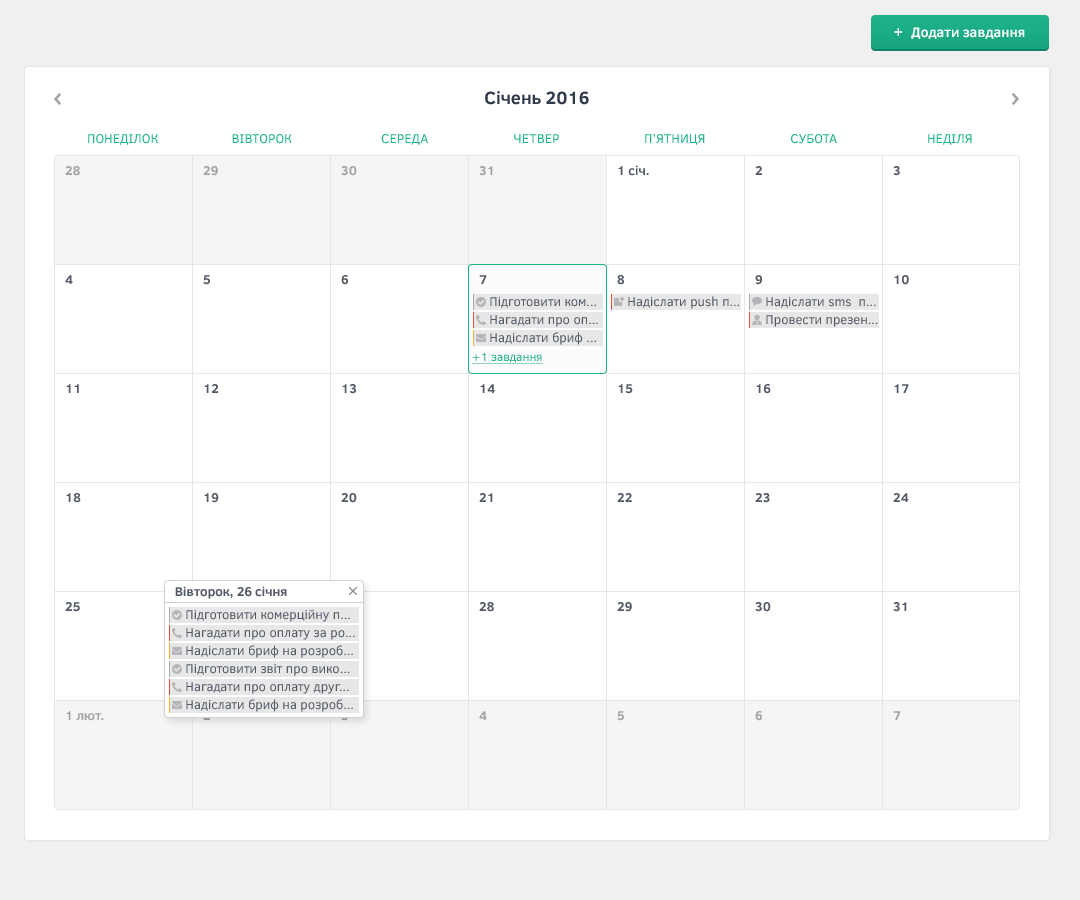
<style>
.page{position:relative;width:1080px;height:900px;background:#ffffff}
.page>*{position:absolute;margin:0}
.t1{font:14px "ClearSans-Bold";color:#ffffff}
.t2{font:18px "ClearSans-Bold";color:#303a4b}
.t3{font:13px "ClearSans";color:#1fb38a;text-transform:uppercase}
.t4{font:13px "ClearSans-Bold";color:#a2a2a2}
.t5{font:13px "ClearSans-Bold";color:#535a65}
.t6{font:13px "ClearSans";color:#535a65}
.t7{font:12px "ClearSans";color:#1dab87;text-decoration:underline}
.t8{font:13px "ClearSans-Bold"}
</style>
<div class="page">
<p class="t1" style="left:894px;top:28px;width:9px;height:8px">+</p>
<p class="t1" style="left:911px;top:27px;width:114px;height:12px">Додати завдання</p>
<p class="t2" style="left:485px;top:91px;width:104px;height:14px">Січень 2016</p>
<p class="t3" style="left:88px;top:134px;width:70px;height:11px">Понеділок</p>
<p class="t3" style="left:232px;top:134px;width:60px;height:10px">Вівторок</p>
<p class="t3" style="left:381px;top:134px;width:47px;height:11px">Середа</p>
<p class="t3" style="left:514px;top:134px;width:45px;height:9px">Четвер</p>
<p class="t3" style="left:645px;top:134px;width:60px;height:11px">П’ятниця</p>
<p class="t3" style="left:791px;top:134px;width:46px;height:10px">Субота</p>
<p class="t3" style="left:928px;top:134px;width:44px;height:11px">Неділя</p>
<p class="t4" style="left:65px;top:166px;width:15px;height:10px">28</p>
<p class="t4" style="left:203px;top:166px;width:15px;height:10px">29</p>
<p class="t4" style="left:341px;top:166px;width:16px;height:10px">30</p>
<p class="t4" style="left:479px;top:166px;width:14px;height:10px">31</p>
<p class="t5" style="left:618px;top:165px;width:31px;height:11px">1 січ.</p>
<p class="t5" style="left:755px;top:166px;width:7px;height:9px">2</p>
<p class="t5" style="left:893px;top:166px;width:7px;height:10px">3</p>
<p class="t5" style="left:65px;top:275px;width:8px;height:9px">4</p>
<p class="t5" style="left:203px;top:275px;width:7px;height:10px">5</p>
<p class="t5" style="left:341px;top:275px;width:7px;height:10px">6</p>
<p class="t5" style="left:479px;top:275px;width:8px;height:9px">7</p>
<p class="t5" style="left:617px;top:275px;width:7px;height:10px">8</p>
<p class="t5" style="left:755px;top:275px;width:7px;height:10px">9</p>
<p class="t5" style="left:894px;top:275px;width:15px;height:10px">10</p>
<p class="t6" style="left:490px;top:297px;width:106px;height:11px">Підготовити ком...</p>
<p class="t6" style="left:628px;top:296px;width:111px;height:13px">Надіслати push п...</p>
<p class="t6" style="left:766px;top:297px;width:110px;height:11px">Надіслати sms  п...</p>
<p class="t6" style="left:490px;top:315px;width:108px;height:12px">Нагадати про оп...</p>
<p class="t6" style="left:766px;top:315px;width:112px;height:12px">Провести презен...</p>
<p class="t6" style="left:490px;top:332px;width:106px;height:13px">Надіслати бриф ...</p>
<p class="t7" style="left:472px;top:352px;width:71px;height:12px">+1 завдання</p>
<p class="t5" style="left:66px;top:384px;width:13px;height:9px">11</p>
<p class="t5" style="left:204px;top:384px;width:15px;height:9px">12</p>
<p class="t5" style="left:342px;top:384px;width:14px;height:10px">13</p>
<p class="t5" style="left:480px;top:384px;width:15px;height:9px">14</p>
<p class="t5" style="left:618px;top:384px;width:15px;height:10px">15</p>
<p class="t5" style="left:756px;top:384px;width:15px;height:10px">16</p>
<p class="t5" style="left:894px;top:384px;width:15px;height:9px">17</p>
<p class="t5" style="left:66px;top:493px;width:15px;height:10px">18</p>
<p class="t5" style="left:204px;top:493px;width:15px;height:10px">19</p>
<p class="t5" style="left:341px;top:493px;width:16px;height:10px">20</p>
<p class="t5" style="left:479px;top:493px;width:14px;height:9px">21</p>
<p class="t5" style="left:617px;top:493px;width:15px;height:9px">22</p>
<p class="t5" style="left:755px;top:493px;width:15px;height:10px">23</p>
<p class="t5" style="left:893px;top:493px;width:16px;height:9px">24</p>
<p class="t5" style="left:175px;top:586px;width:112px;height:13px">Вівторок, 26 січня</p>
<p class="t5" style="left:65px;top:602px;width:15px;height:10px">25</p>
<p class="t5" style="left:479px;top:602px;width:15px;height:10px">28</p>
<p class="t5" style="left:617px;top:602px;width:15px;height:10px">29</p>
<p class="t5" style="left:755px;top:602px;width:16px;height:10px">30</p>
<p class="t5" style="left:893px;top:602px;width:14px;height:10px">31</p>
<p class="t6" style="left:186px;top:609px;width:164px;height:13px">Підготовити комерційну п...</p>
<p class="t6" style="left:186px;top:628px;width:169px;height:12px">Нагадати про оплату за ро...</p>
<p class="t6" style="left:186px;top:645px;width:167px;height:13px">Надіслати бриф на розроб...</p>
<p class="t6" style="left:186px;top:664px;width:164px;height:12px">Підготовити звіт про вико...</p>
<p class="t6" style="left:186px;top:682px;width:163px;height:12px">Нагадати про оплату друг...</p>
<p class="t6" style="left:186px;top:699px;width:167px;height:13px">Надіслати бриф на розроб...</p>
<p class="t4" style="left:66px;top:711px;width:38px;height:10px">1 лют.</p>
<p class="t8" style="left:203px;top:711px;width:7px;height:9px">2</p>
<p class="t4" style="left:479px;top:711px;width:8px;height:9px">4</p>
<p class="t4" style="left:617px;top:711px;width:7px;height:10px">5</p>
<p class="t4" style="left:755px;top:711px;width:7px;height:10px">6</p>
<p class="t4" style="left:893px;top:711px;width:8px;height:9px">7</p>
</div>
